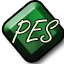
<style>
.page{position:relative;width:64px;height:64px;background:#ffffff}
.page>*{position:absolute;margin:0}
.t1{font:34.7px "FreestyleScript-Regular";color:#eeffd3}
</style>
<div class="page">
<p class="t1" style="left:12px;top:19px;width:47px;height:25px">PES</p>
</div>
